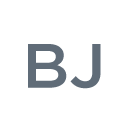
<style>
.page{position:relative;width:128px;height:128px;background:#ffffff}
.page>*{position:absolute;margin:0}
.t1{font:62.5px "iCielGotham-Medium";color:#606c78;scale:1.05 1}
</style>
<div class="page">
<p class="t1" style="left:28px;top:44px;width:73px;height:45px">BJ</p>
</div>
